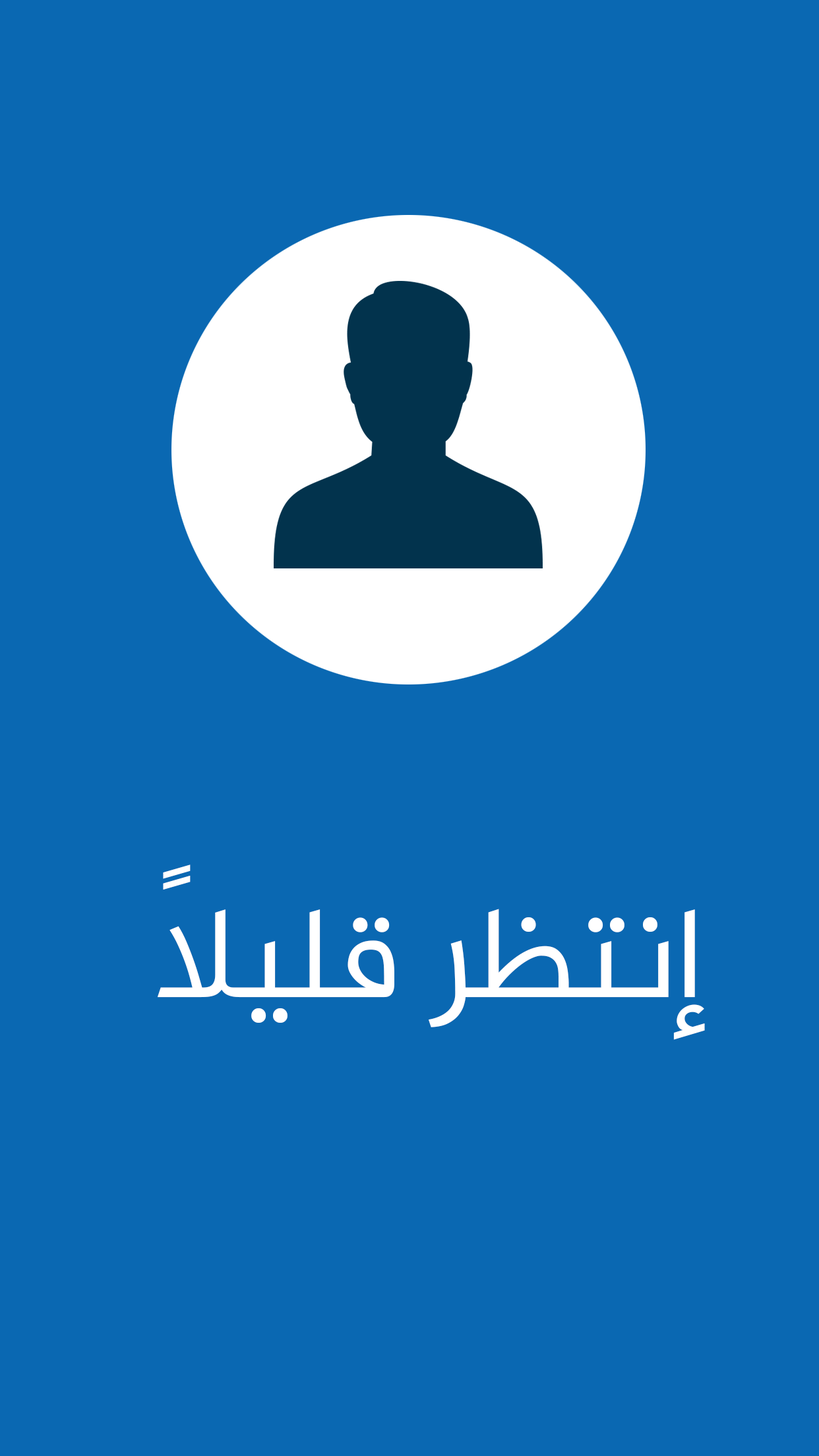
<style>
.page{position:relative;width:819px;height:1456px;background:#0a68b2}
.page>*{position:absolute;margin:0}
.t1{font:131.9px "Al-Jazeera-Arabic-Regular";color:#ffffff}
</style>
<div class="page">
<p class="t1" style="left:158px;top:864px;width:547px;height:176px">إنتظر قليلاً</p>
</div>
